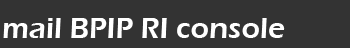
<style>
.page{position:relative;width:350px;height:48px;background:#333333}
.page>*{position:absolute;margin:0}
.t1{font:30px "ErasITC-Demi";color:#ffffff}
</style>
<div class="page">
<p class="t1" style="left:3px;top:18px;width:282px;height:20px">mail BPIP RI console</p>
</div>
